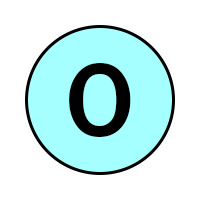
<style>
.page{position:relative;width:200px;height:200px;background:#ffffff}
.page>*{position:absolute;margin:0}
.t1{font:108px "FranklinGothic-Medium";color:#000000}
</style>
<div class="page">
<p class="t1" style="left:69px;top:63px;width:62px;height:74px">O</p>
</div>
